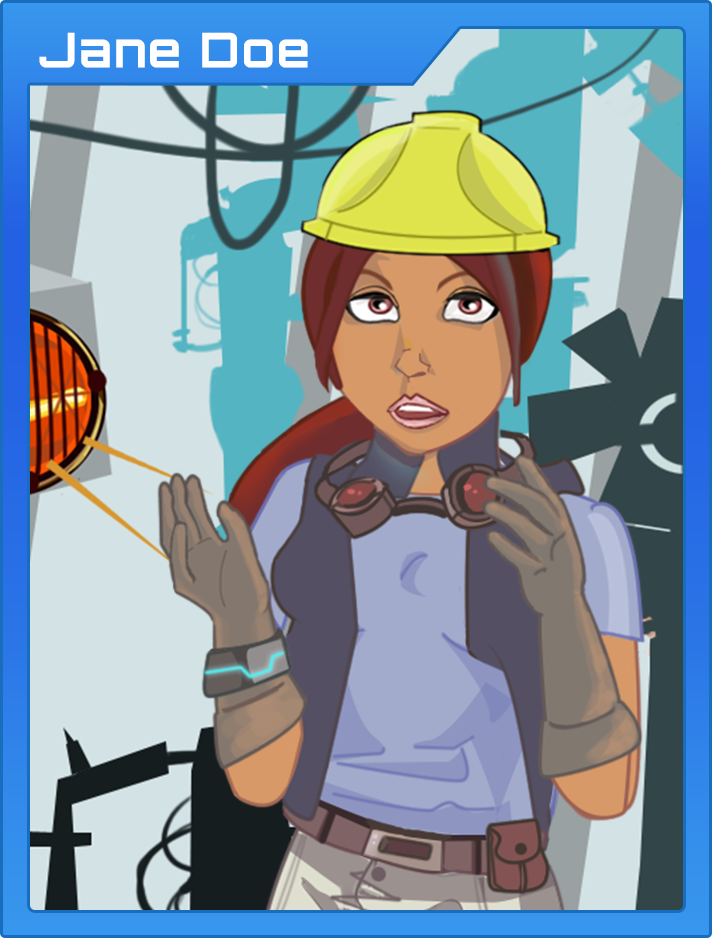
<style>
.page{position:relative;width:712px;height:938px}
.page>*{position:absolute;margin:0}
.t1{font:48px "Orbitron-Bold";letter-spacing:0.04em;color:#ffffff}
</style>
<div class="page">
<p class="t1" style="left:39px;top:32px;width:269px;height:36px">Jane Doe</p>
</div>
